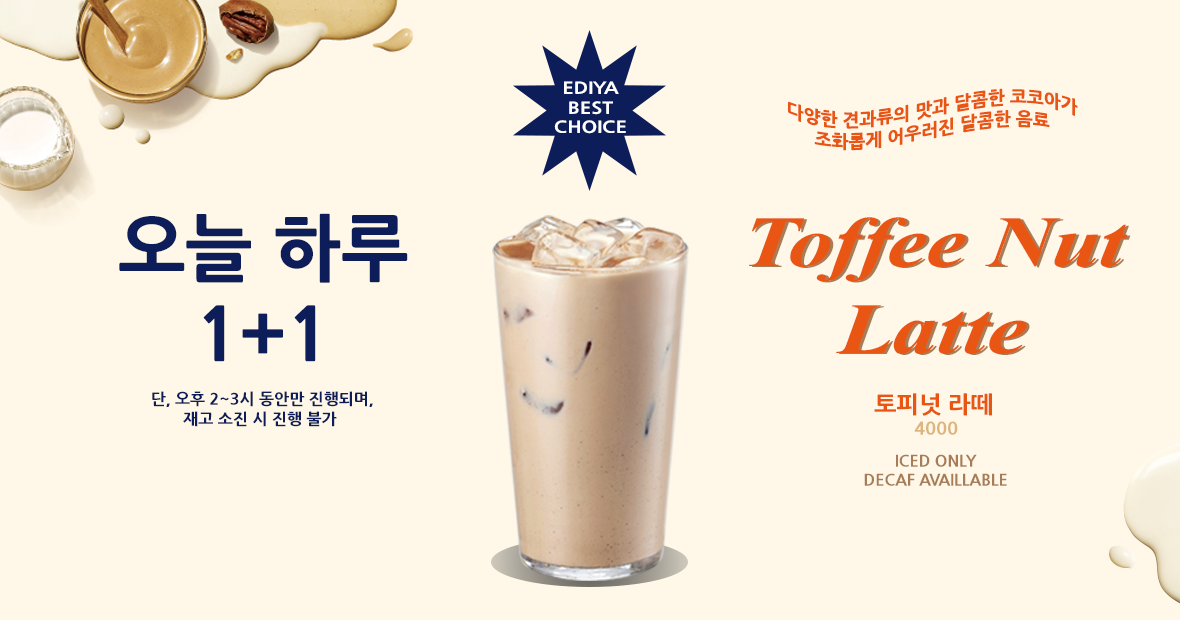
<style>
.page{position:relative;width:1180px;height:620px;background:#fff8e8}
.page>*{position:absolute;margin:0}
.t1{font:15.9px "NanumGothicExtraBold";color:#ffffff;scale:1.25 1}
.t2{font:18px "NanumGothicExtraBold";color:#e95613}
.t3{font:72px "NanumGothicExtraBold";color:#0d1d59}
.t4{font:72px "TimesNewRomanPS-BoldItalicMT";color:#e95613;scale:1.25 1}
.t5{font:72px "TimesNewRomanPS-BoldItalicMT";scale:1.25 1}
.t6{font:16px "NanumGothicExtraBold";color:#0d1d59}
.t7{font:24px "NanumGothicExtraBold";color:#e95613}
.t8{font:18px "NanumGothicExtraBold";color:#ddb47e}
.t9{font:16px "NanumGothicExtraBold";color:#a87c56}
</style>
<div class="page">
<p class="t1" style="left:554px;top:81px;width:72px;height:53px;text-align:center">EDIYA<br>BEST<br>CHOICE</p>
<p class="t2" style="left:788px;top:88px;width:290px;height:63px;text-align:center">다양한 견과류의 맛과 달콤한 코코아가<br>조화롭게 어우러진 달콤한 음료</p>
<p class="t3" style="left:119px;top:213px;width:289px;height:149px;text-align:center">오늘 하루<br>1+1</p>
<p class="t4" style="left:749px;top:217px;width:379px;height:137px;text-align:center">Toffee Nut<br>Latte</p>
<p class="t5" style="left:752px;top:218px;width:379px;height:137px;text-align:center">Toffee Nut<br>Latte</p>
<p class="t6" style="left:152px;top:391px;width:221px;height:36px;text-align:center">단, 오후 2~3시 동안만 진행되며,<br>재고 소진 시 진행 불가</p>
<p class="t7" style="left:874px;top:393px;width:118px;height:42px;text-align:center">토피넛 라떼<span class="t2"> <br></span><span class="t8">4000</span></p>
<p class="t9" style="left:864px;top:454px;width:143px;height:32px;text-align:center">ICED ONLY<br>DECAF AVAILLABLE</p>
</div>
